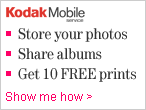
<style>
.page{position:relative;width:146px;height:110px;background:#ffffff}
.page>*{position:absolute;margin:0}
.t1{font:16px/20px "Tele-Antiqua";color:#333333}
.t2{font:12px "ArialMT";color:#ff0066}
</style>
<div class="page">
<p class="t1" style="left:18px;top:28px;width:118px;height:54px">Store your photos<br>Share albums<br>Get 10 FREE prints</p>
<p class="t2" style="left:6px;top:92px;width:86px;height:9px">Show me how &gt;</p>
</div>
